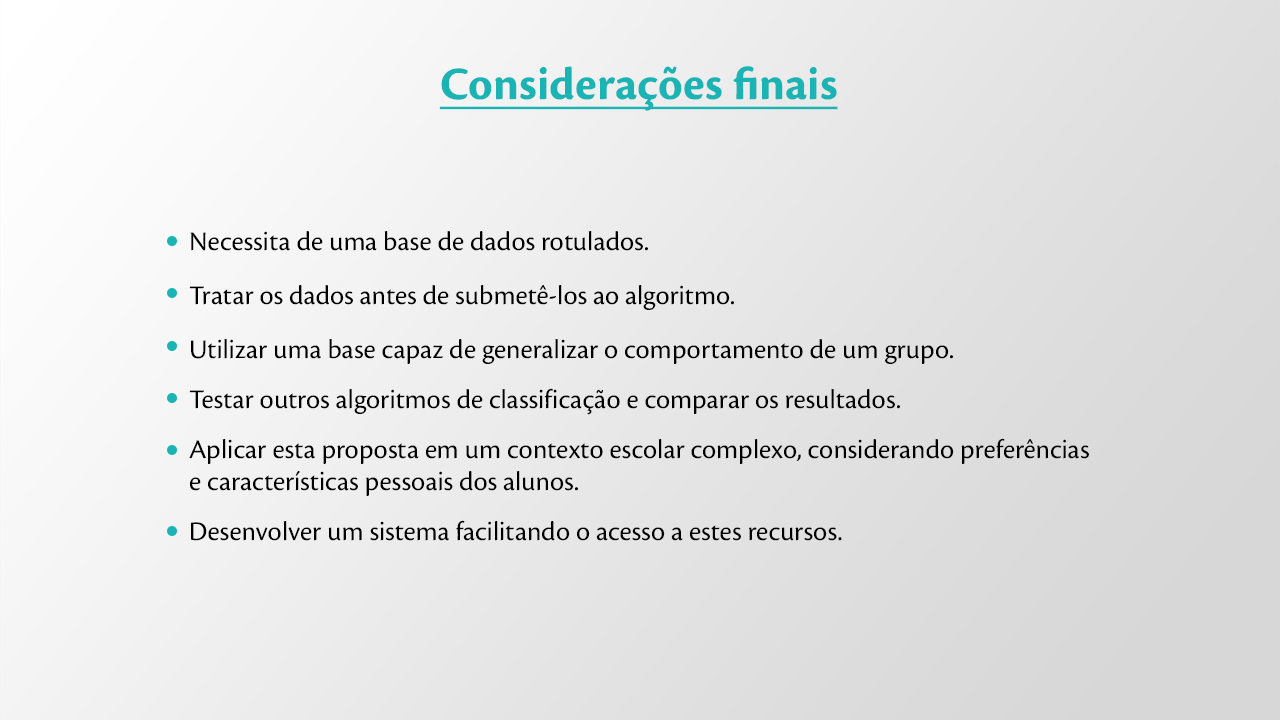
<style>
.page{position:relative;width:1280px;height:720px}
.page>*{position:absolute;margin:0}
.t1{font:48px "CronosPro-Bold";color:#1ab4b4;text-decoration:underline}
.t2{font:28px/32px "CronosPro-Regular";color:#000000}
.t3{font:28px/18px "CronosPro-Regular";color:#000000}
</style>
<div class="page">
<p class="t1" style="left:439px;top:66px;width:399px;height:45px">Considerações finais</p>
<p class="t2" style="left:189px;top:231px;width:900px;height:310px"><span class="t3">Necessita de uma base de dados rotulados.<br><br><br>Tratar os dados antes de submetê-los ao algoritmo.<br><br><br>Utilizar uma base capaz de generalizar o comportamento de um grupo.<br><br>Test</span>ar outros algoritmos de classificação e comparar os resultados.<br><br>Aplicar esta proposta em um contexto escolar complexo, considerando preferências e características pessoais dos alunos.<br><span class="t3"><br>D</span>esenvolver um sistema facilitando o acesso a estes recursos.</p>
</div>
